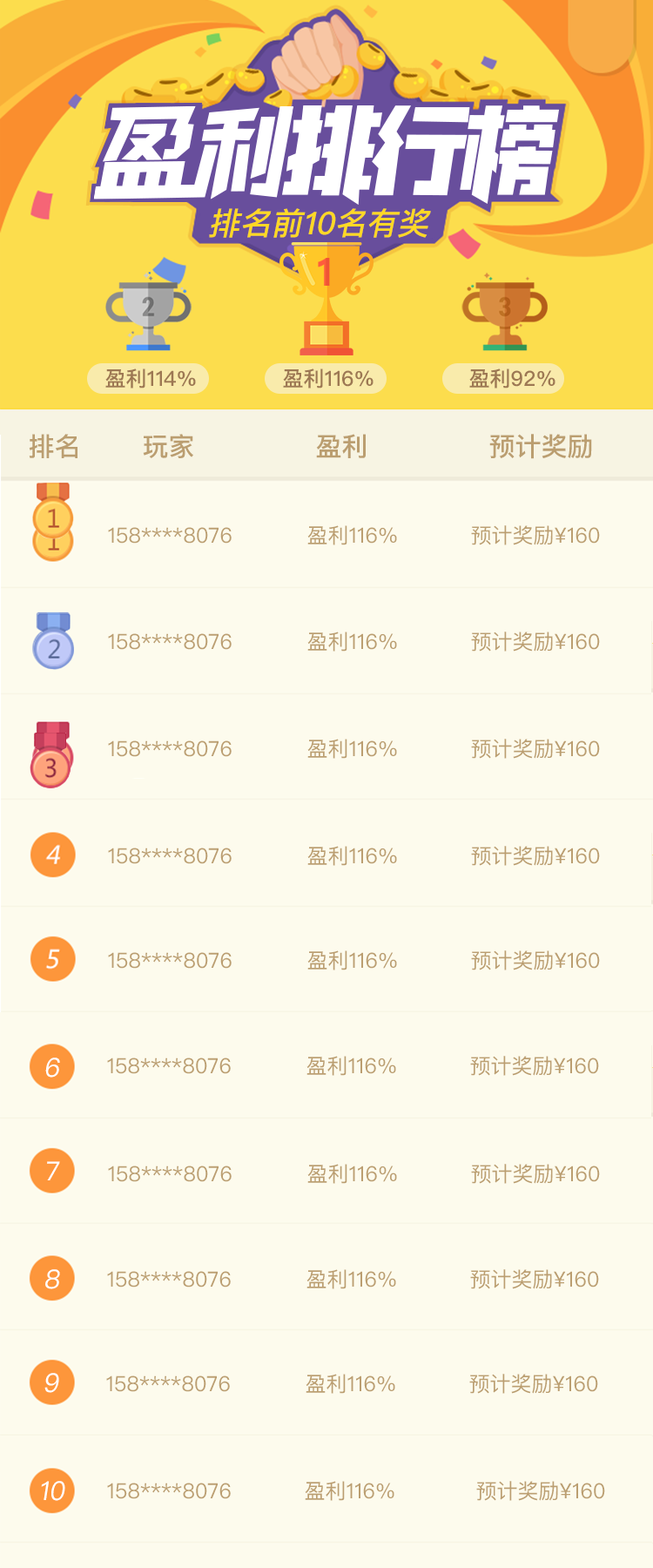
<style>
.page{position:relative;width:653px;height:1568px;background:#fdfbed}
.page>*{position:absolute;margin:0}
.t1{font:32px "PingFangSC-Medium";color:#ffd825}
.t2{font:20.9px "PingFangSC-Medium";color:#9d7853}
.t3{font:26.1px "PingFangSC-Medium";color:#bb9e70}
.t4{font:20.9px "PingFangSC-Regular";color:#bb9e70}
.t5{font:26.4px "PingFangSC-Regular";color:#ffffff}
</style>
<div class="page">
<p class="t1" style="left:209px;top:209px;width:222px;height:30px">排名前10名有奖</p>
<p class="t2" style="left:105px;top:368px;width:91px;height:21px">盈利114%</p>
<p class="t2" style="left:283px;top:368px;width:91px;height:21px">盈利116%</p>
<p class="t2" style="left:470px;top:368px;width:86px;height:21px">盈利92%</p>
<p class="t3" style="left:29px;top:434px;width:49px;height:24px">排名</p>
<p class="t3" style="left:143px;top:434px;width:50px;height:24px">玩家</p>
<p class="t3" style="left:316px;top:434px;width:50px;height:24px">盈利</p>
<p class="t3" style="left:490px;top:434px;width:102px;height:25px">预计奖励</p>
<p class="t4" style="left:108px;top:527px;width:124px;height:17px">158****8076</p>
<p class="t4" style="left:308px;top:525px;width:89px;height:20px">盈利116%</p>
<p class="t4" style="left:471px;top:525px;width:129px;height:20px">预计奖励¥160</p>
<p class="t4" style="left:108px;top:633px;width:124px;height:17px">158****8076</p>
<p class="t4" style="left:308px;top:632px;width:89px;height:20px">盈利116%</p>
<p class="t4" style="left:471px;top:632px;width:129px;height:20px">预计奖励¥160</p>
<p class="t4" style="left:108px;top:740px;width:124px;height:17px">158****8076</p>
<p class="t4" style="left:308px;top:739px;width:89px;height:20px">盈利116%</p>
<p class="t4" style="left:471px;top:739px;width:129px;height:20px">预计奖励¥160</p>
<p class="t4" style="left:308px;top:846px;width:89px;height:20px">盈利116%</p>
<p class="t4" style="left:471px;top:846px;width:129px;height:20px">预计奖励¥160</p>
<p class="t4" style="left:108px;top:848px;width:124px;height:16px">158****8076</p>
<p class="t4" style="left:108px;top:952px;width:124px;height:17px">158****8076</p>
<p class="t4" style="left:308px;top:950px;width:89px;height:20px">盈利116%</p>
<p class="t4" style="left:471px;top:950px;width:129px;height:20px">预计奖励¥160</p>
<p class="t5" style="left:45px;top:1058px;width:15px;height:20px">6</p>
<p class="t4" style="left:107px;top:1058px;width:124px;height:16px">158****8076</p>
<p class="t4" style="left:307px;top:1056px;width:89px;height:20px">盈利116%</p>
<p class="t4" style="left:470px;top:1056px;width:129px;height:20px">预计奖励¥160</p>
<p class="t5" style="left:47px;top:1161px;width:13px;height:19px">7</p>
<p class="t4" style="left:108px;top:1166px;width:124px;height:16px">158****8076</p>
<p class="t4" style="left:308px;top:1164px;width:89px;height:20px">盈利116%</p>
<p class="t4" style="left:471px;top:1164px;width:129px;height:20px">预计奖励¥160</p>
<p class="t5" style="left:45px;top:1269px;width:15px;height:20px">8</p>
<p class="t4" style="left:107px;top:1271px;width:124px;height:17px">158****8076</p>
<p class="t4" style="left:307px;top:1269px;width:89px;height:20px">盈利116%</p>
<p class="t4" style="left:470px;top:1269px;width:129px;height:20px">预计奖励¥160</p>
<p class="t5" style="left:44px;top:1373px;width:15px;height:20px">9</p>
<p class="t4" style="left:306px;top:1374px;width:89px;height:20px">盈利116%</p>
<p class="t4" style="left:470px;top:1374px;width:128px;height:20px">预计奖励¥160</p>
<p class="t4" style="left:106px;top:1375px;width:124px;height:17px">158****8076</p>
<p class="t5" style="left:41px;top:1481px;width:24px;height:20px">10</p>
<p class="t4" style="left:305px;top:1481px;width:90px;height:20px">盈利116%</p>
<p class="t4" style="left:476px;top:1481px;width:129px;height:20px">预计奖励¥160</p>
<p class="t4" style="left:107px;top:1483px;width:124px;height:16px">158****8076</p>
</div>
